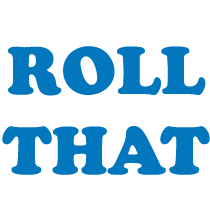
<style>
.page{position:relative;width:210px;height:210px;background:#ffffff}
.page>*{position:absolute;margin:0}
.t1{font:66.7px "CooperBlackStd";color:#0277bd}
</style>
<div class="page">
<p class="t1" style="left:2px;top:46px;width:208px;height:129px;text-align:center">ROLL<br>THAT</p>
</div>
